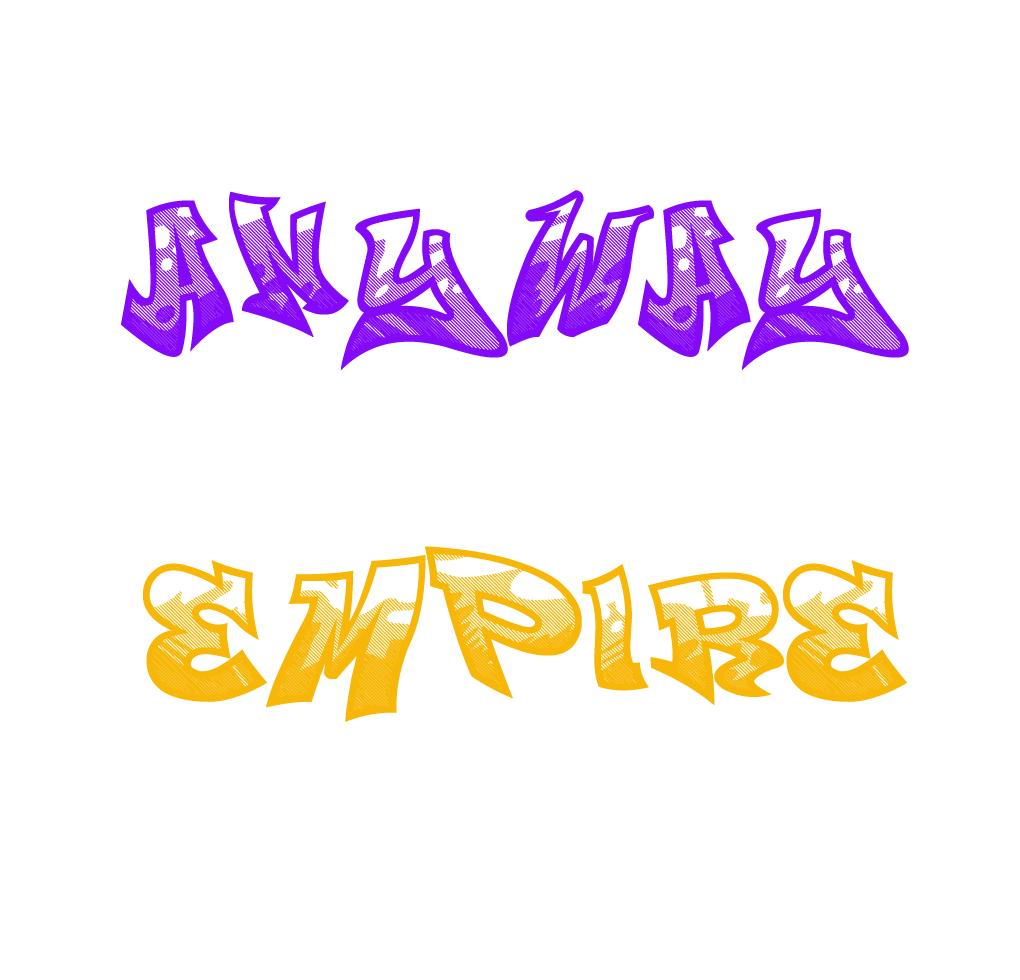
<style>
.page{position:relative;width:1020px;height:980px;background:#ffffff}
.page>*{position:absolute;margin:0}
.t1{font:100px "Smasher312Custom";letter-spacing:-0.025em;color:#8409f7}
.t2{font:100px "Smasher312Custom";letter-spacing:-0.025em;color:#f7b709}
</style>
<div class="page">
<p class="t1" style="left:121px;top:190px;width:788px;height:181px">ANYWAY</p>
<p class="t2" style="left:143px;top:546px;width:764px;height:176px">EMPIRE</p>
</div>
